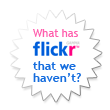
<style>
.page{position:relative;width:110px;height:110px;background:#ffffff}
.page>*{position:absolute;margin:0}
.t1{font:11px "TrebuchetMS";color:#ff5ead}
.t2{font:12px/12px "TrebuchetMS-Bold";color:#156dde}
</style>
<div class="page">
<p class="t1" style="left:33px;top:29px;width:45px;height:8px">What has</p>
<p class="t2" style="left:33px;top:61px;width:48px;height:21px">that we<br>haven’t?</p>
</div>
